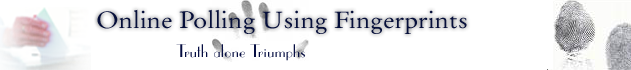
<style>
.page{position:relative;width:631px;height:70px;background:#ffffff}
.page>*{position:absolute;margin:0}
.t1{font:23.5px "OriginalGaramondBT-Roman";color:#060f3a;scale:1.1 1}
.t2{font:17.5px "ParisianBT-Regular";color:#060e42;scale:1.1 1}
</style>
<div class="page">
<p class="t1" style="left:97px;top:9px;width:370px;height:25px">Online Polling Using Fingerprints</p>
<p class="t2" style="left:176px;top:44px;width:129px;height:17px">Truth alone Triumphs</p>
</div>
